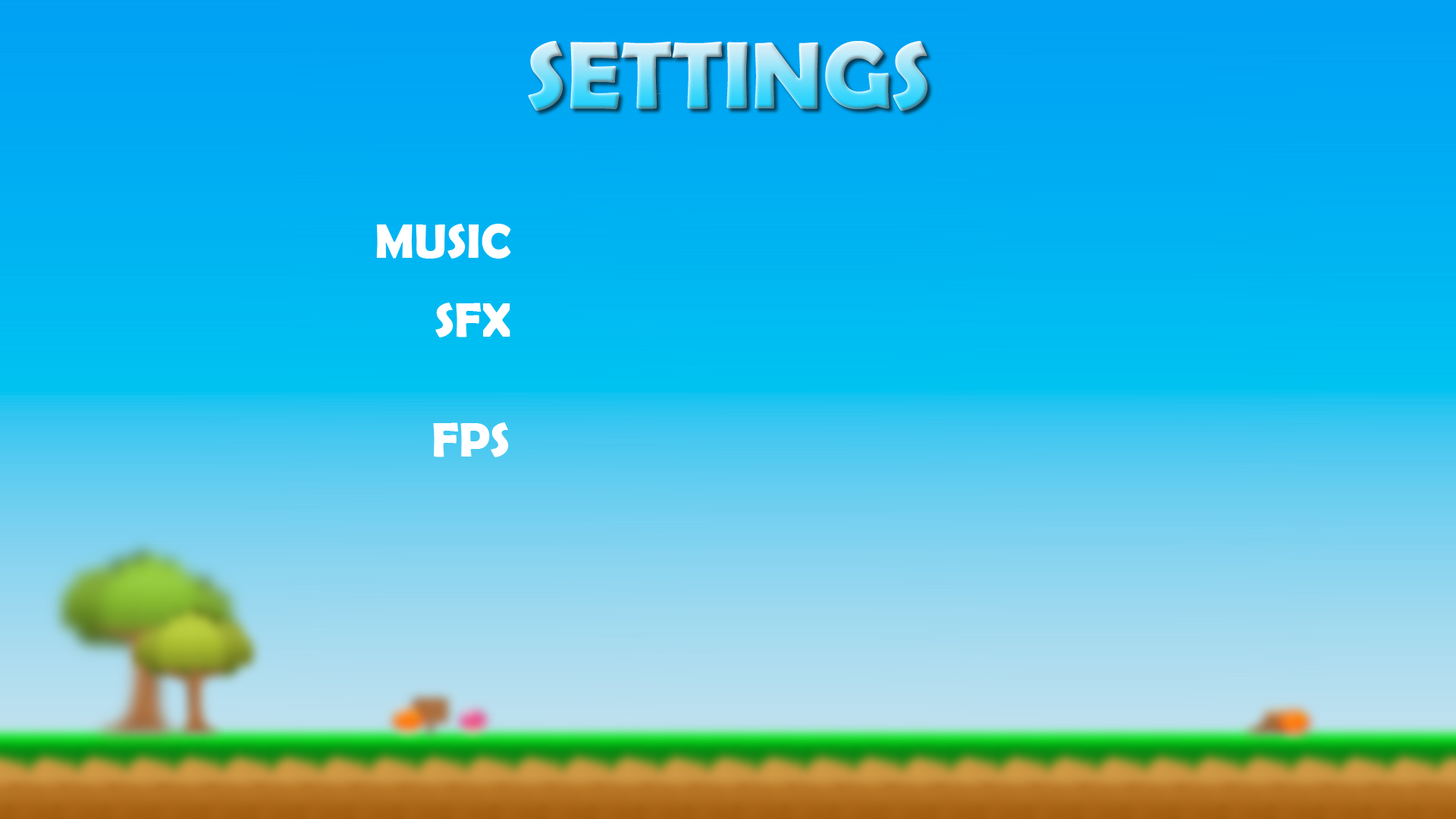
<style>
.page{position:relative;width:1456px;height:819px}
.page>*{position:absolute;margin:0}
.t1{font:96.3px "BerlinSansFBDemi-Bold"}
.t2{font:48.2px "BerlinSansFBDemi-Bold";color:#ffffff}
</style>
<div class="page">
<p class="t1" style="left:528px;top:41px;width:399px;height:70px">SETTINGS</p>
<p class="t2" style="left:376px;top:224px;width:135px;height:35px">MUSIC</p>
<p class="t2" style="left:435px;top:303px;width:75px;height:34px">SFX</p>
<p class="t2" style="left:433px;top:422px;width:76px;height:35px">FPS</p>
</div>
